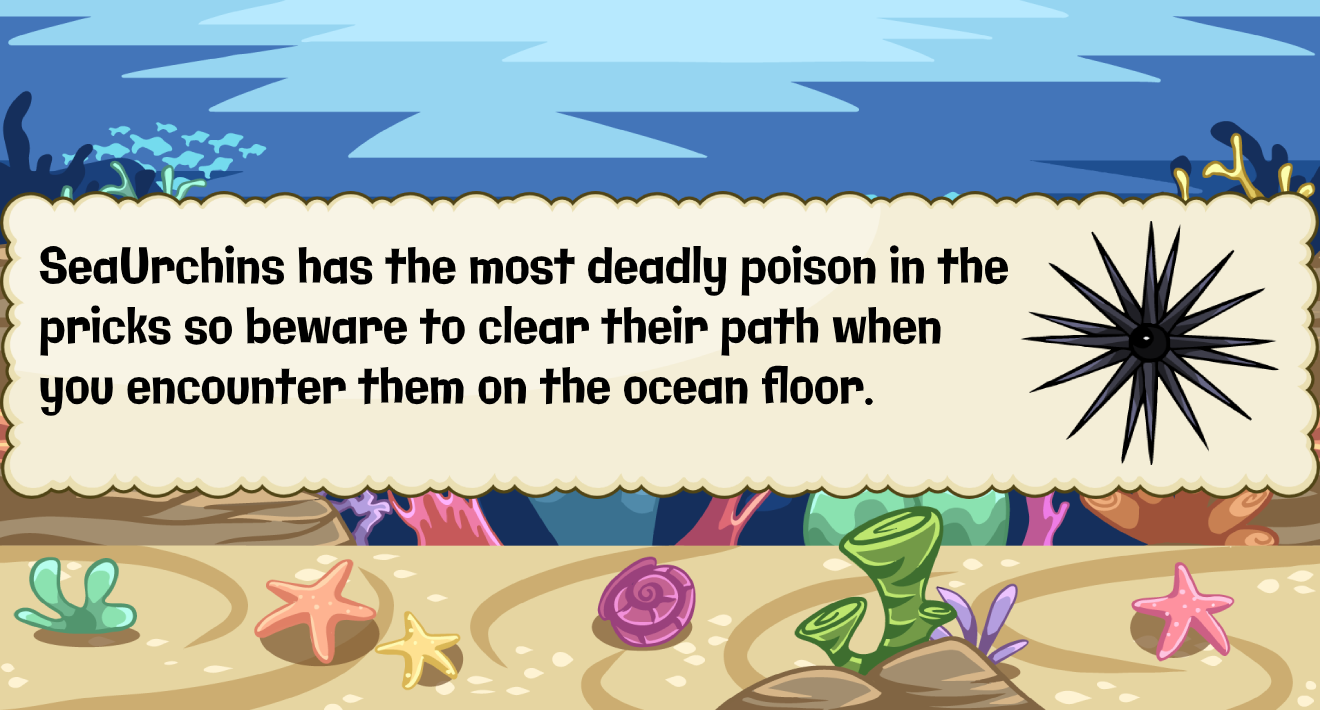
<style>
.page{position:relative;width:1320px;height:710px}
.page>*{position:absolute;margin:0}
.t1{font:50.1px "Galindo-Regular";color:#000000;scale:0.82 1}
</style>
<div class="page">
<p class="t1" style="left:39px;top:245px;width:969px;height:171px">SeaUrchins has the most deadly poison in the <br>pricks so beware to clear their path when <br>you encounter them on the ocean floor.</p>
</div>
